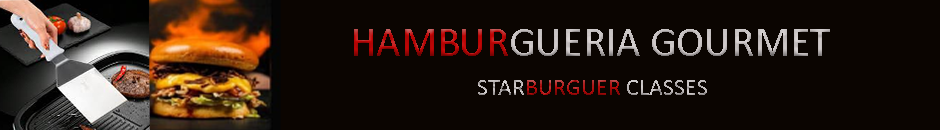
<style>
.page{position:relative;width:940px;height:130px;background:#0b0501}
.page>*{position:absolute;margin:0}
.t1{font:42px "Calibri"}
.t2{font:24px "Calibri"}
</style>
<div class="page">
<p class="t1" style="left:354px;top:29px;width:476px;height:27px">HAMBURGUERIA GOURMET</p>
<p class="t2" style="left:478px;top:80px;width:229px;height:15px">STARBURGUER CLASSES</p>
</div>
